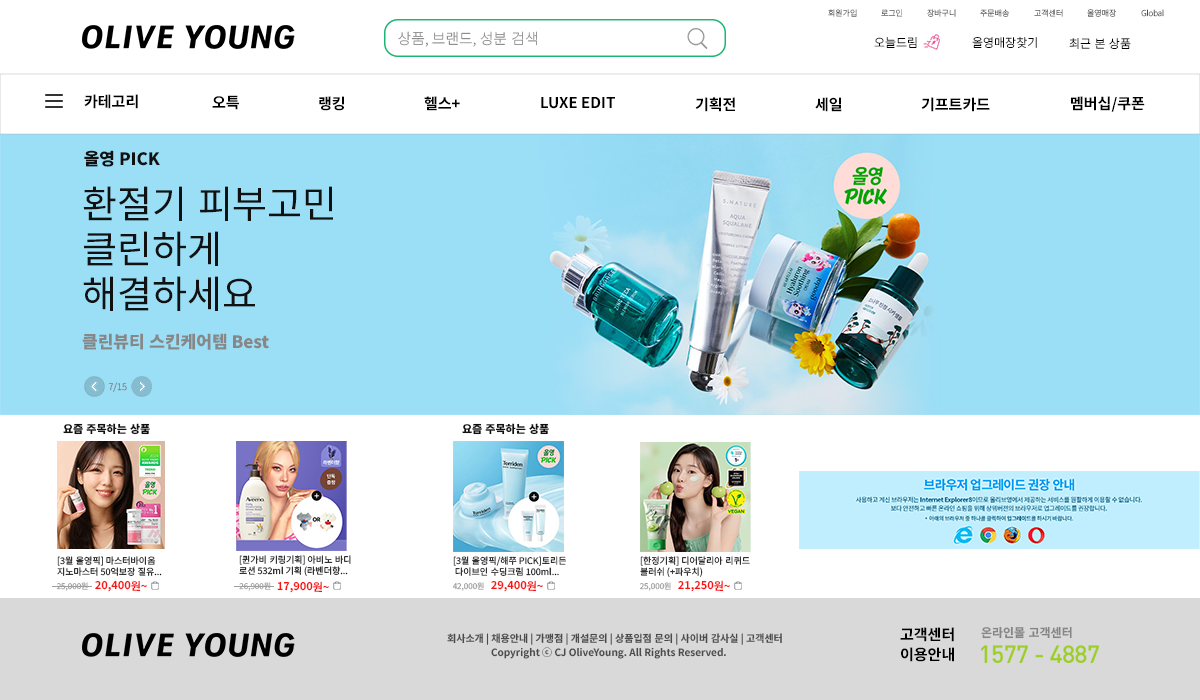
<style>
.page{position:relative;width:1200px;height:700px;background:#ffffff}
.page>*{position:absolute;margin:0}
.t1{font:8px "NotoSansKR-Thin"}
.t2{font:8px "NotoSansKR-Thin";color:#4b4b4b}
.t3{font:14.9px "NotoSansKR-ExtraLight";color:#858383}
.t4{font:12px "NotoSansKR-ExtraLight";color:#000000}
.t5{font:15px "NotoSansKR-Bold";color:#000000}
.t6{font:17px "NotoSansKR-Black";color:#111111}
.t7{font:38px/45px "NotoSansKR-Regular";color:#111111}
.t8{font:17px "NotoSansKR-Black";color:#878787}
.t9{font:9.3px "NotoSansKR-ExtraLight";color:#7e7b7b}
.t10{font:11px "NotoSansKR-Black";color:#111111}
.t11{font:9px/11px "NotoSansKR-Regular";color:#111111}
.t12{font:9px/11px "NotoSansKR-Regular"}
.t13{font:8px "NotoSansKR-Regular";color:#9f9e9e}
.t14{font:11px "NotoSansKR-Bold";color:#fa1515}
.t15{font:15px/20px "NotoSansKR-Bold";color:#000000}
.t16{font:12px "NotoSansKR-Bold";color:#858585}
.t17{font:10px "NotoSansKR-Bold";color:#4b4b4b}
</style>
<div class="page">
<p class="t1" style="left:828px;top:9px;width:29px;height:8px">회원가입</p>
<p class="t1" style="left:881px;top:9px;width:22px;height:8px">로그인</p>
<p class="t1" style="left:927px;top:9px;width:29px;height:8px">장바구니</p>
<p class="t1" style="left:980px;top:9px;width:29px;height:8px">주문배송</p>
<p class="t1" style="left:1034px;top:9px;width:29px;height:8px">고객센터</p>
<p class="t1" style="left:1087px;top:9px;width:30px;height:8px">올영매장</p>
<p class="t2" style="left:1141px;top:9px;width:23px;height:8px">Global</p>
<p class="t3" style="left:398px;top:31px;width:139px;height:16px">상품, 브랜드, 성분 검색</p>
<p class="t4" style="left:874px;top:37px;width:43px;height:11px">오늘드림</p>
<p class="t4" style="left:972px;top:36px;width:65px;height:12px">올영매장찾기</p>
<p class="t4" style="left:1069px;top:38px;width:62px;height:11px">최근 본 상품</p>
<p class="t5" style="left:84px;top:94px;width:54px;height:15px">카테고리</p>
<p class="t5" style="left:212px;top:95px;width:27px;height:15px">오특</p>
<p class="t5" style="left:319px;top:96px;width:25px;height:15px">랭킹</p>
<p class="t5" style="left:424px;top:96px;width:36px;height:15px">헬스+</p>
<p class="t5" style="left:541px;top:97px;width:74px;height:12px">LUXE EDIT</p>
<p class="t5" style="left:695px;top:97px;width:40px;height:15px">기획전</p>
<p class="t5" style="left:815px;top:97px;width:27px;height:15px">세일</p>
<p class="t5" style="left:921px;top:97px;width:69px;height:15px">기프트카드</p>
<p class="t5" style="left:1071px;top:96px;width:74px;height:16px">멤버십/쿠폰</p>
<p class="t6" style="left:84px;top:150px;width:76px;height:17px">올영 PICK</p>
<p class="t7" style="left:83px;top:186px;width:250px;height:125px">환절기 피부고민<br>클린하게<br>해결하세요</p>
<p class="t8" style="left:82px;top:333px;width:187px;height:17px">클린뷰티 스킨케어템 Best</p>
<p class="t9" style="left:108px;top:382px;width:19px;height:10px">7/15</p>
<p class="t10" style="left:63px;top:423px;width:87px;height:12px">요즘 주목하는 상품</p>
<p class="t10" style="left:462px;top:423px;width:87px;height:12px">요즘 주목하는 상품</p>
<p class="t11" style="left:57px;top:556px;width:105px;height:20px">[3월 올영픽] 마스터바이옴 <br>지노마스터 50억보장 질유...</p>
<p class="t11" style="left:239px;top:555px;width:112px;height:21px">[퀸가비 키링기획] 아비노 바디<br>로션 532ml 기획 (라벤더향...</p>
<p class="t11" style="left:453px;top:556px;width:113px;height:20px">[3월 올영픽/해쭈 PICK]토리든<br> 다이브인 수딩크림 100ml...</p>
<p class="t12" style="left:640px;top:556px;width:110px;height:21px">[한정기획] 디어달리아 리퀴드 <br>블러쉬 (+파우치)</p>
<p class="t13" style="left:56px;top:582px;width:32px;height:9px">25,000원</p>
<p class="t14" style="left:95px;top:580px;width:52px;height:12px;rotate:1deg">20,400원~</p>
<p class="t13" style="left:239px;top:582px;width:32px;height:9px">26,900원</p>
<p class="t14" style="left:277px;top:581px;width:52px;height:12px;rotate:1deg">17,900원~</p>
<p class="t13" style="left:452px;top:582px;width:32px;height:9px">42,000원</p>
<p class="t14" style="left:491px;top:580px;width:52px;height:12px;rotate:1deg">29,400원~</p>
<p class="t13" style="left:639px;top:582px;width:32px;height:9px">25,000원</p>
<p class="t14" style="left:678px;top:580px;width:52px;height:12px;rotate:1deg">21,250원~</p>
<p class="t15" style="left:900px;top:627px;width:54px;height:35px">고객센터<br>이용안내</p>
<p class="t16" style="left:981px;top:626px;width:91px;height:13px">온라인몰 고객센터</p>
<p class="t17" style="left:447px;top:633px;width:335px;height:12px">회사소개 | 채용안내 | 가맹점 | 개설문의 | 상품입점 문의 | 사이버 감사실 | 고객센터</p>
<p class="t17" style="left:491px;top:647px;width:235px;height:12px">Copyright ⓒ CJ OliveYoung. All Rights Reserved.</p>
</div>
